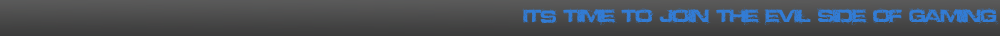
<style>
.page{position:relative;width:1000px;height:36px}
.page>*{position:absolute;margin:0}
.t1{font:18px "Defused-ExtendedBold";letter-spacing:-0.05em;color:#327cd5}
</style>
<div class="page">
<p class="t1" style="left:522px;top:7px;width:477px;height:19px">ITs TIME TO JOIN THE EVIL SIDE OF GAMING</p>
</div>
